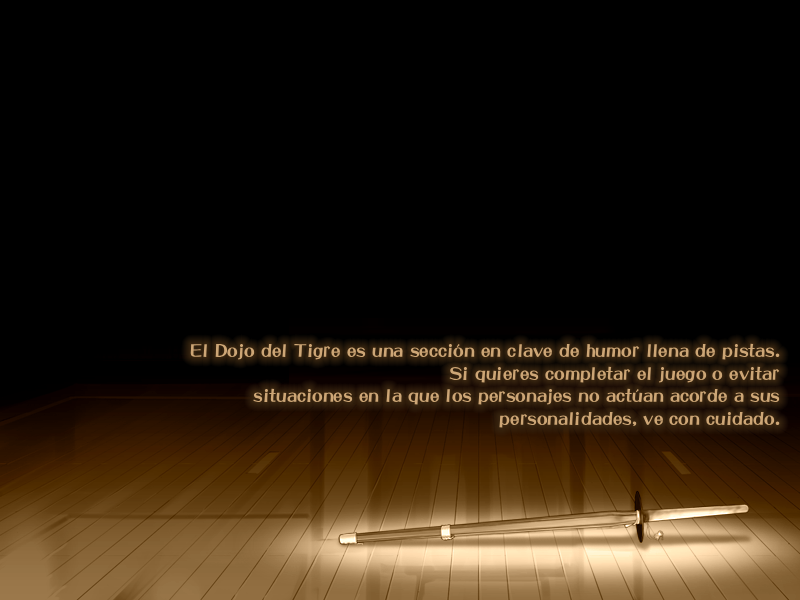
<style>
.page{position:relative;width:800px;height:600px;background:#000000}
.page>*{position:absolute;margin:0}
.t1{font:19px "DFPOPCornStd-W12";color:#cda676}
</style>
<div class="page">
<p class="t1" style="left:190px;top:343px;width:590px;height:85px;text-align:right">El Dojo del Tigre es una sección en clave de humor llena de pistas. <br>Si quieres completar el juego o evitar <br>situaciones en la que los personajes no actúan acorde a sus <br>personalidades, ve con cuidado.</p>
</div>
